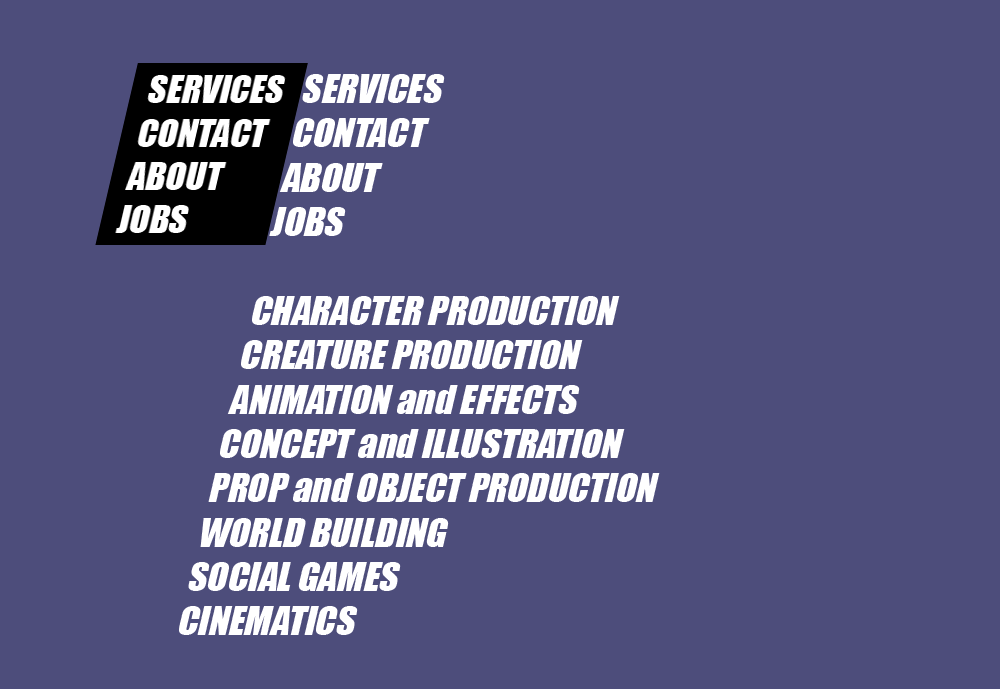
<style>
.page{position:relative;width:1000px;height:689px;background:#4d4d7b}
.page>*{position:absolute;margin:0}
.t1{font:38px "Impact";color:#ffffff}
</style>
<div class="page">
<p class="t1" style="left:179px;top:74px;width:481px;height:561px">SERVICES<br>CONTACT<br>ABOUT<br>JOBS<br><br>CHARACTER PRODUCTION<br>CREATURE PRODUCTION<br>ANIMATION and EFFECTS<br>CONCEPT and ILLUSTRATION<br>PROP and OBJECT PRODUCTION<br>WORLD BUILDING<br>SOCIAL GAMES<br>CINEMATICS</p>
</div>
